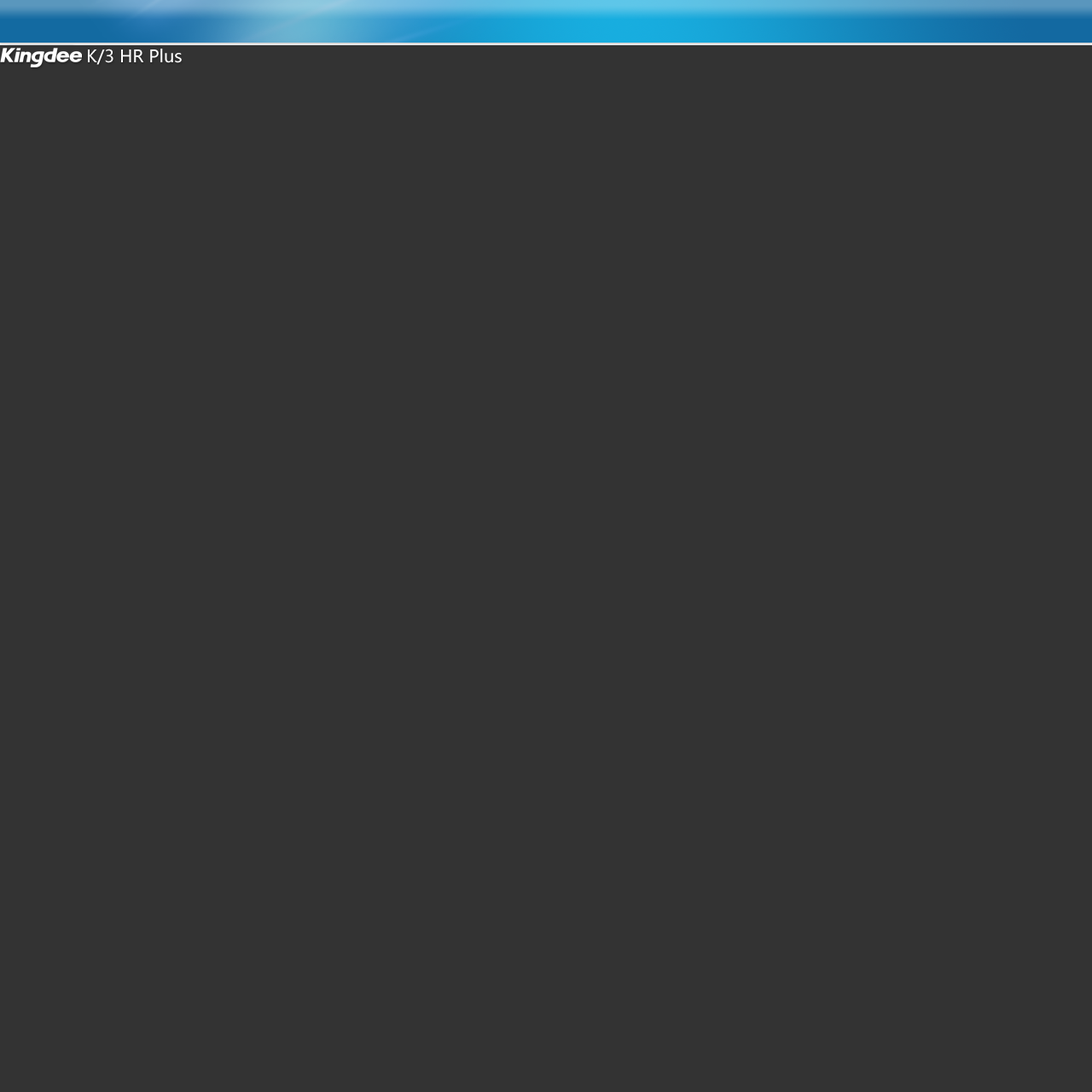
<style>
.page{position:relative;width:1092px;height:1092px;background:#333333}
.page>*{position:absolute;margin:0}
.t1{font:17.1px "MicrosoftYaHei";color:#ffffff}
</style>
<div class="page">
<p class="t1" style="left:88px;top:49px;width:94px;height:16px">K/3 HR Plus</p>
</div>
